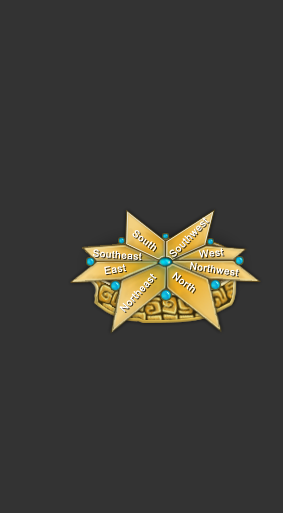
<style>
.page{position:relative;width:283px;height:513px;background:#333333}
.page>*{position:absolute;margin:0}
.t1{font:10px "ArialMT";letter-spacing:0.05em;color:#ffffff}
</style>
<div class="page">
<p class="t1" style="left:169px;top:217px;width:40px;height:40px;rotate:-46deg">Southwest</p>
<p class="t1" style="left:132px;top:230px;width:24px;height:22px;rotate:37deg">South</p>
<p class="t1" style="left:93px;top:249px;width:49px;height:12px;rotate:4deg">Southeast</p>
<p class="t1" style="left:198px;top:248px;width:26px;height:10px;rotate:-5deg">West</p>
<p class="t1" style="left:104px;top:264px;width:22px;height:11px;rotate:-9deg">East</p>
<p class="t1" style="left:190px;top:262px;width:49px;height:15px;rotate:8deg">Northwest</p>
<p class="t1" style="left:119px;top:273px;width:38px;height:39px;rotate:-48deg">Northeast</p>
<p class="t1" style="left:172px;top:272px;width:23px;height:21px;rotate:36deg">North</p>
</div>
